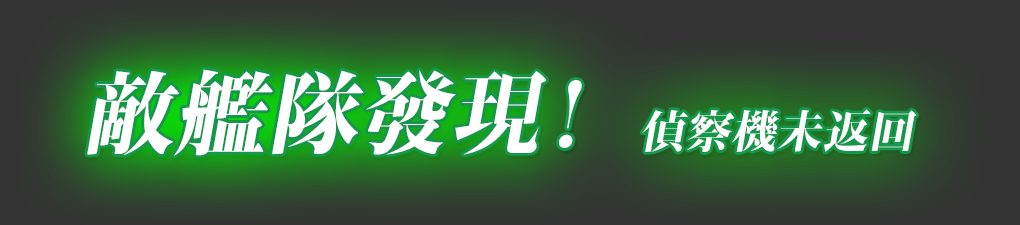
<style>
.page{position:relative;width:1020px;height:225px}
.page>*{position:absolute;margin:0}
.t1{font:90px "KochoStd-Heavy";letter-spacing:0.02em;color:#ffffff;font-style:italic}
.t2{font:45px "KochoStd-Heavy";letter-spacing:0.02em;color:#ffffff;font-style:italic}
</style>
<div class="page">
<p class="t1" style="left:87px;top:69px;width:495px;height:87px">敵艦隊發現！</p>
<p class="t2" style="left:642px;top:109px;width:275px;height:43px">偵察機未返回</p>
</div>
